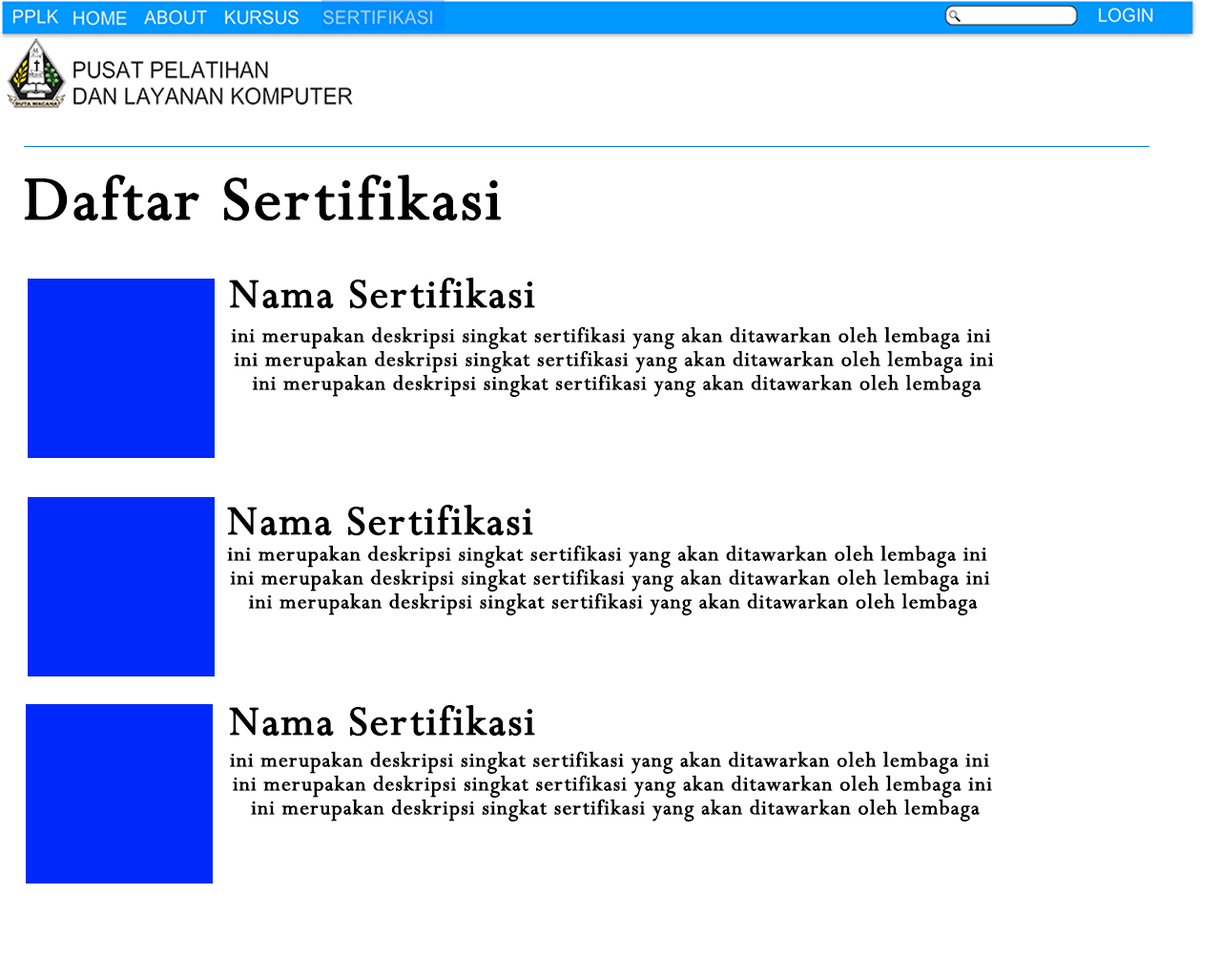
<style>
.page{position:relative;width:1221px;height:977px;background:#ffffff}
.page>*{position:absolute;margin:0}
.t1{font:68.7px "Perpetua";letter-spacing:0.025em;color:#000000;font-weight:bold}
.t2{font:45.8px "Perpetua";letter-spacing:0.025em;color:#000000;font-weight:bold}
.t3{font:22.9px/23.8px "Perpetua";letter-spacing:0.025em;color:#000000;font-weight:bold}
</style>
<div class="page">
<p class="t1" style="left:24px;top:175px;width:478px;height:46px">Daftar Sertifikasi</p>
<p class="t2" style="left:229px;top:278px;width:306px;height:31px">Nama Sertifikasi</p>
<p class="t3" style="left:231px;top:326px;width:763px;height:71px;text-align:center">ini merupakan deskripsi singkat sertifikasi yang akan ditawarkan oleh lembaga ini<br>ini merupakan deskripsi singkat sertifikasi yang akan ditawarkan oleh lembaga ini <br>ini merupakan deskripsi singkat sertifikasi yang akan ditawarkan oleh lembaga</p>
<p class="t2" style="left:227px;top:505px;width:306px;height:31px">Nama Sertifikasi</p>
<p class="t3" style="left:227px;top:545px;width:763px;height:70px;text-align:center">ini merupakan deskripsi singkat sertifikasi yang akan ditawarkan oleh lembaga ini<br>ini merupakan deskripsi singkat sertifikasi yang akan ditawarkan oleh lembaga ini <br>ini merupakan deskripsi singkat sertifikasi yang akan ditawarkan oleh lembaga</p>
<p class="t2" style="left:229px;top:705px;width:306px;height:31px">Nama Sertifikasi</p>
<p class="t3" style="left:230px;top:751px;width:762px;height:70px;text-align:center">ini merupakan deskripsi singkat sertifikasi yang akan ditawarkan oleh lembaga ini<br>ini merupakan deskripsi singkat sertifikasi yang akan ditawarkan oleh lembaga ini <br>ini merupakan deskripsi singkat sertifikasi yang akan ditawarkan oleh lembaga</p>
</div>
